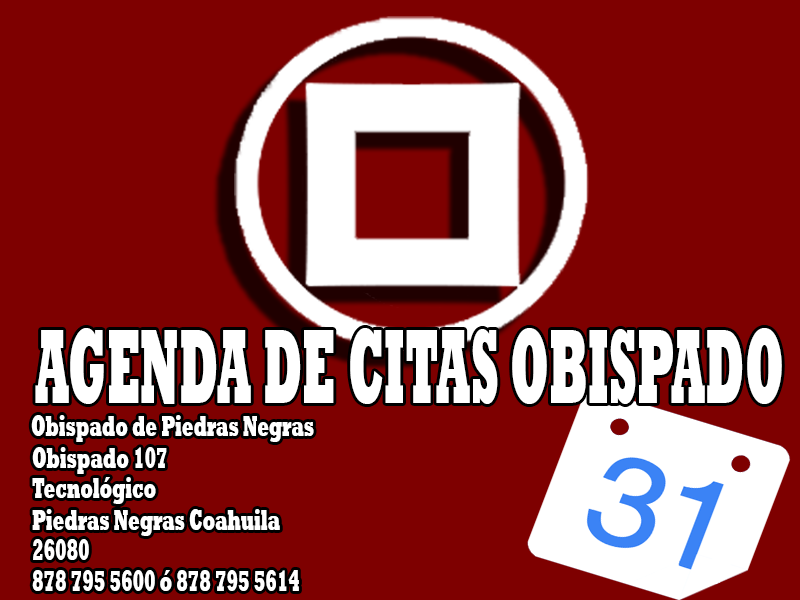
<style>
.page{position:relative;width:800px;height:600px;background:#7e0000}
.page>*{position:absolute;margin:0}
.t1{font:108.2px "Rockwell-ExtraBold";color:#ffffff;scale:0.42 1}
.t2{font:29.7px "Rockwell-ExtraBold";color:#ffffff;scale:0.56 1}
</style>
<div class="page">
<p class="t1" style="left:35px;top:328px;width:747px;height:76px">AGENDA DE CITAS OBISPADO</p>
<p class="t2" style="left:31px;top:415px;width:283px;height:27px">Obispado de Piedras Negras</p>
<p class="t2" style="left:32px;top:447px;width:135px;height:27px">Obispado 107</p>
<p class="t2" style="left:32px;top:477px;width:124px;height:27px">Tecnológico</p>
<p class="t2" style="left:32px;top:509px;width:248px;height:27px">Piedras Negras Coahuila</p>
<p class="t2" style="left:33px;top:539px;width:56px;height:21px">26080</p>
<p class="t2" style="left:32px;top:570px;width:267px;height:21px">878 795 5600 ó 878 795 5614</p>
</div>
